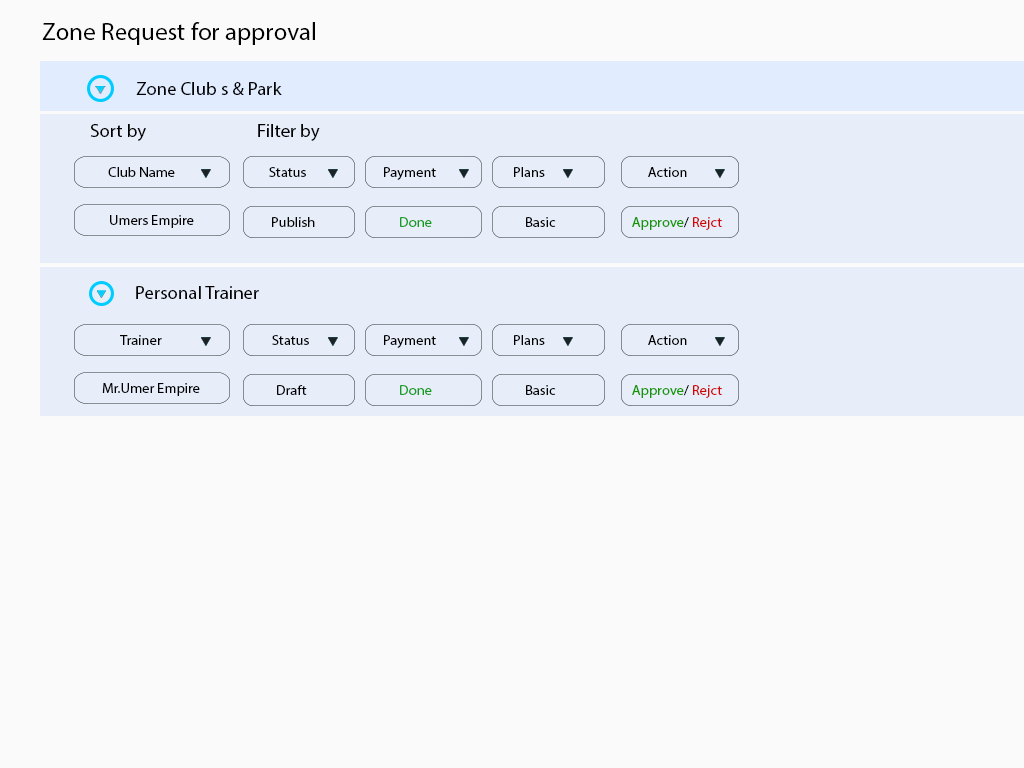
<style>
.page{position:relative;width:1024px;height:768px;background:#fafafa}
.page>*{position:absolute;margin:0}
.t1{font:25px "MyriadPro-Regular";color:#010101}
.t2{font:18.4px "MyriadPro-Regular";color:#010101}
.t3{font:18.4px "MyriadPro-Regular";color:#000000}
.t4{font:13.8px "MyriadPro-Regular";color:#000000;scale:1.05 1}
.t5{font:13.8px "MyriadPro-Regular";color:#119c1b;scale:1.05 1}
.t6{font:13.8px "MyriadPro-Regular";color:#010101;scale:1.05 1}
.t7{font:13.8px "MyriadPro-Regular";color:#139702;scale:1.05 1}
.t8{font:13.8px "MyriadPro-Regular";color:#d00505;scale:1.05 1}
</style>
<div class="page">
<p class="t1" style="left:42px;top:22px;width:273px;height:23px">Zone Request for approval</p>
<p class="t2" style="left:136px;top:82px;width:146px;height:13px">Zone Club s &amp; Park</p>
<p class="t3" style="left:90px;top:124px;width:56px;height:17px">Sort by</p>
<p class="t3" style="left:258px;top:124px;width:62px;height:17px">Filter by</p>
<p class="t4" style="left:108px;top:167px;width:67px;height:10px">Club Name</p>
<p class="t4" style="left:269px;top:167px;width:37px;height:10px">Status</p>
<p class="t4" style="left:384px;top:167px;width:52px;height:13px">Payment</p>
<p class="t4" style="left:514px;top:167px;width:31px;height:10px">Plans</p>
<p class="t4" style="left:648px;top:167px;width:39px;height:10px">Action</p>
<p class="t4" style="left:110px;top:215px;width:84px;height:13px">Umers Empire</p>
<p class="t4" style="left:272px;top:217px;width:43px;height:10px">Publish</p>
<p class="t5" style="left:400px;top:217px;width:32px;height:10px">Done</p>
<p class="t6" style="left:526px;top:217px;width:30px;height:10px">Basic</p>
<p class="t7" style="left:632px;top:217px;width:90px;height:13px">Approve<span class="t4">/ </span><span class="t8">Rejct</span></p>
<p class="t2" style="left:136px;top:286px;width:123px;height:13px">Personal Trainer</p>
<p class="t4" style="left:120px;top:335px;width:42px;height:10px">Trainer</p>
<p class="t4" style="left:272px;top:335px;width:37px;height:10px">Status</p>
<p class="t4" style="left:384px;top:335px;width:52px;height:13px">Payment</p>
<p class="t4" style="left:514px;top:335px;width:31px;height:10px">Plans</p>
<p class="t4" style="left:648px;top:335px;width:39px;height:10px">Action</p>
<p class="t4" style="left:102px;top:383px;width:98px;height:13px">Mr.Umer Empire</p>
<p class="t4" style="left:277px;top:385px;width:30px;height:10px">Draft</p>
<p class="t5" style="left:400px;top:385px;width:32px;height:10px">Done</p>
<p class="t6" style="left:526px;top:385px;width:30px;height:10px">Basic</p>
<p class="t7" style="left:632px;top:385px;width:90px;height:13px">Approve<span class="t4">/ </span><span class="t8">Rejct</span></p>
</div>
